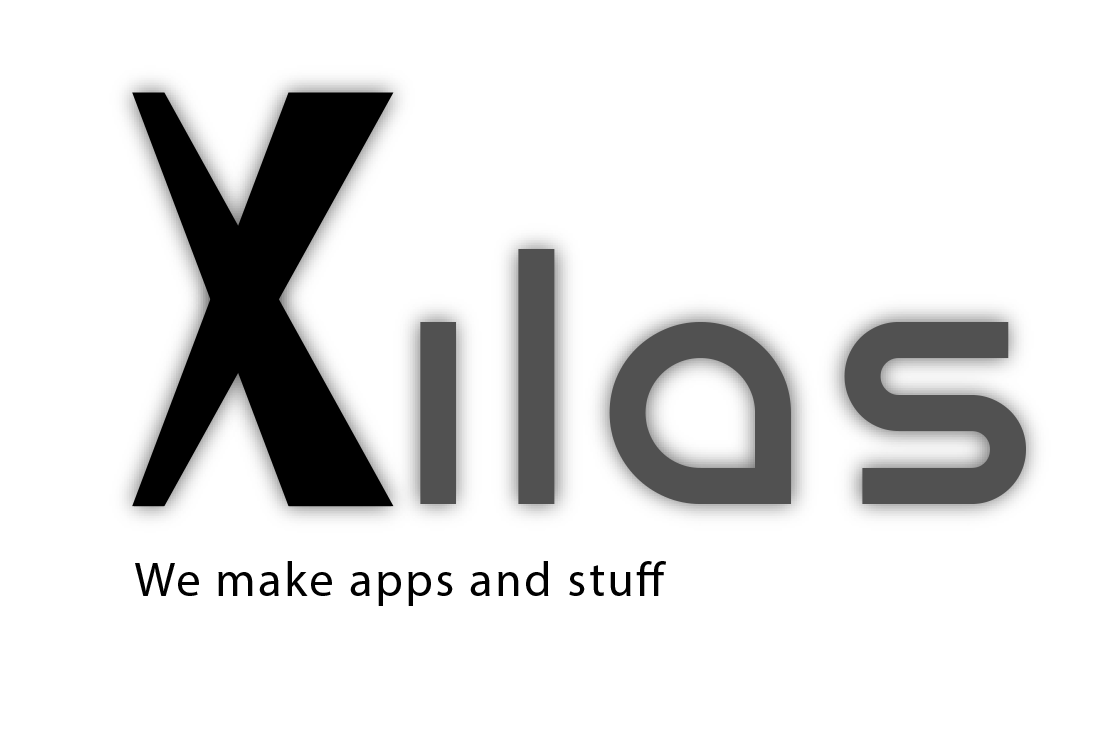
<style>
.page{position:relative;width:1118px;height:736px;background:#ffffff}
.page>*{position:absolute;margin:0}
.t1{font:48.6px "MyriadPro-Regular";letter-spacing:0.05em;color:#000000}
</style>
<div class="page">
<p class="t1" style="left:135px;top:561px;width:531px;height:45px">We make apps and stuff</p>
</div>
